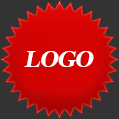
<style>
.page{position:relative;width:119px;height:119px;background:#333333}
.page>*{position:absolute;margin:0}
.t1{font:24px "TimesNewRomanPS-BoldMT";letter-spacing:-0.05em;color:#ffffff;font-style:italic}
</style>
<div class="page">
<p class="t1" style="left:24px;top:51px;width:70px;height:16px">LOGO</p>
</div>
